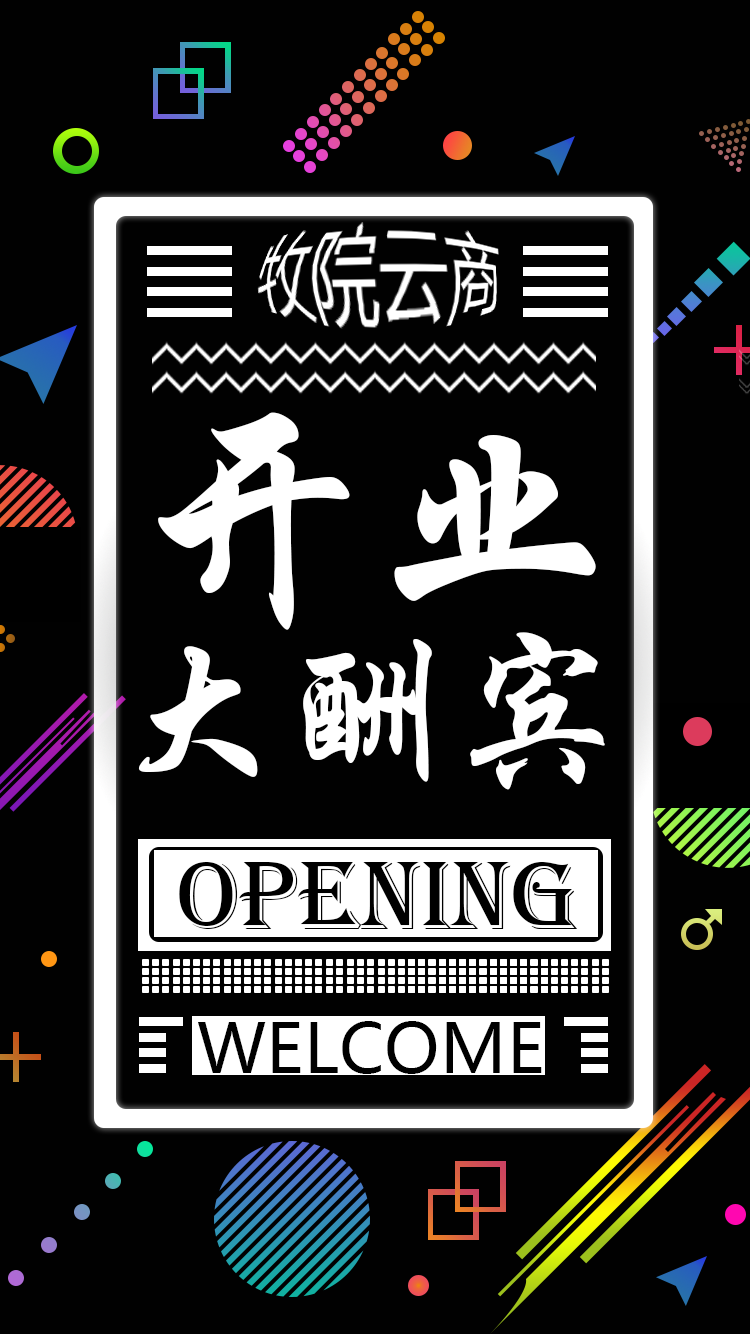
<style>
.page{position:relative;width:750px;height:1334px;background:#010101}
.page>*{position:absolute;margin:0}
.t1{font:245.7px "STXingkai";color:#ffffff}
.t2{font:173.1px "STXingkai";color:#ffffff}
.t3{font:100.2px "Algerian";color:#000000}
.t4{font:68.2px "MicrosoftYaHei";color:#000000}
</style>
<div class="page">
<p class="t1" style="left:158px;top:412px;width:438px;height:218px">开业</p>
<p class="t2" style="left:138px;top:632px;width:467px;height:158px">大酬宾</p>
<p class="t3" style="left:179px;top:862px;width:399px;height:67px">OPENING</p>
<p class="t4" style="left:198px;top:1021px;width:344px;height:53px">WELCOME</p>
</div>
